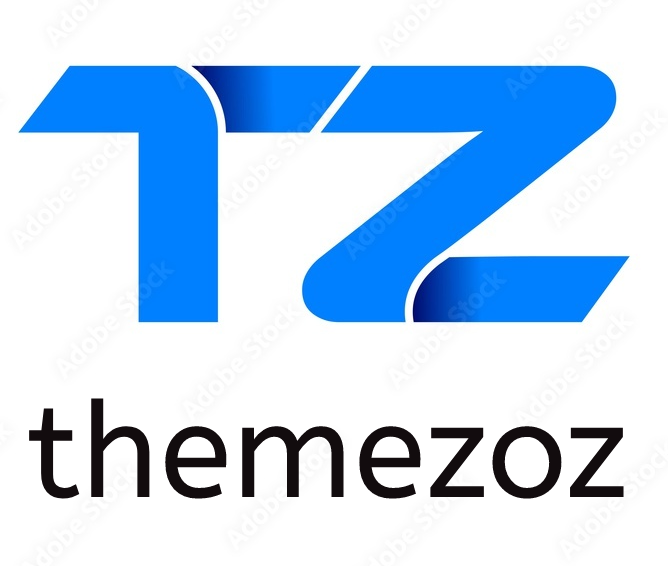
<style>
.page{position:relative;width:668px;height:566px;background:#ffffff}
.page>*{position:absolute;margin:0}
.t1{font:133px "ABeeZee-Regular";color:#120c0e}
</style>
<div class="page">
<p class="t1" style="left:29px;top:398px;width:595px;height:101px">themezoz</p>
</div>
